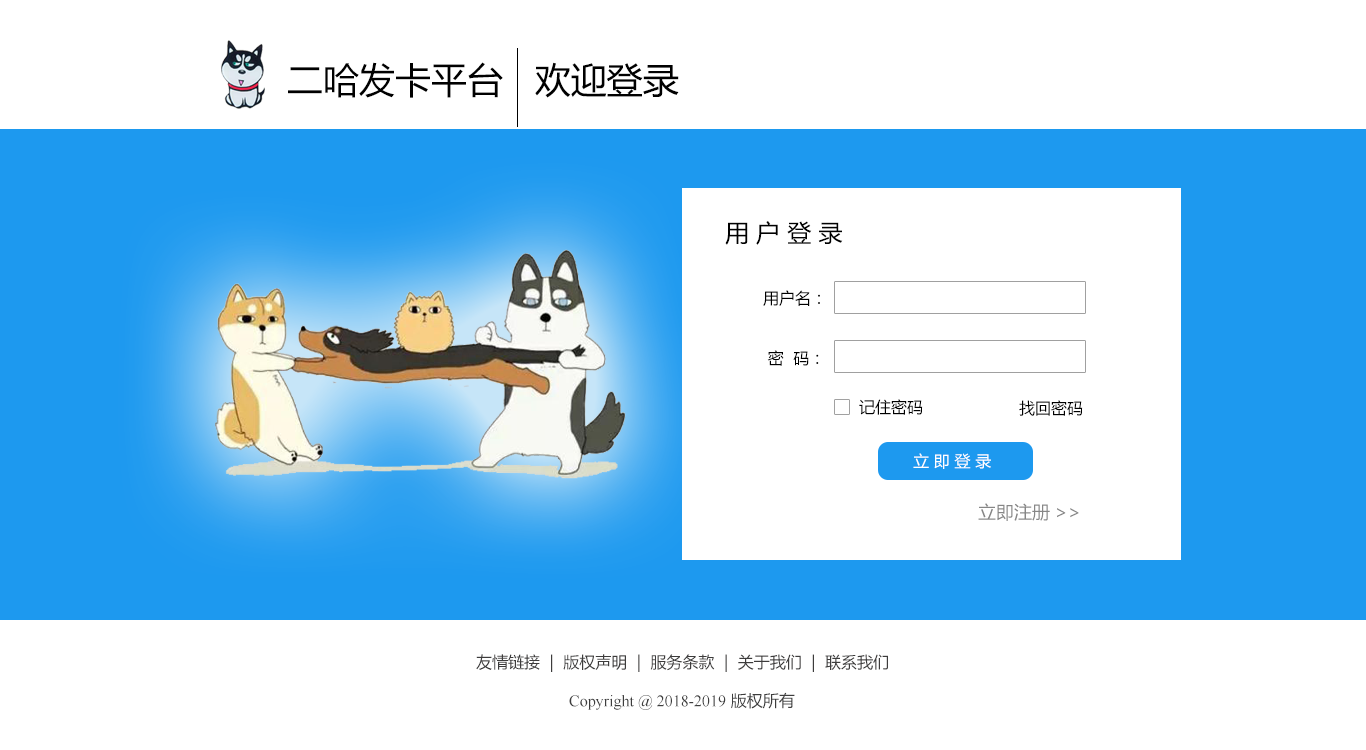
<style>
.page{position:relative;width:1366px;height:750px;background:#ffffff}
.page>*{position:absolute;margin:0}
.t1{font:36px "MicrosoftYaHei";color:#000000}
.t2{font:24px "MicrosoftYaHei";color:#000000}
.t3{font:16px/60px "MicrosoftYaHei";color:#000000}
.t4{font:16px "MicrosoftYaHei";color:#000000}
.t5{font:16px "MicrosoftYaHei";color:#ffffff}
.t6{font:18px "MicrosoftYaHei";color:#868686}
.t7{font:16px "MicrosoftYaHei";color:#3d3c3c}
.t8{font:16px "TimesNewRomanPSMT";color:#3d3d3d}
.t9{font:16px "MicrosoftYaHei";color:#3d3d3d}
</style>
<div class="page">
<p class="t1" style="left:288px;top:62px;width:391px;height:36px">二哈发卡平台   欢迎登录</p>
<p class="t2" style="left:725px;top:221px;width:118px;height:24px">用 户 登 录</p>
<p class="t3" style="left:763px;top:290px;width:57px;height:76px">用户名：<br> 密  码：</p>
<p class="t4" style="left:859px;top:399px;width:64px;height:16px">记住密码</p>
<p class="t4" style="left:1019px;top:400px;width:64px;height:16px">找回密码</p>
<p class="t5" style="left:913px;top:453px;width:78px;height:16px">立 即 登 录</p>
<p class="t6" style="left:978px;top:503px;width:101px;height:18px">立即注册&gt;&gt;</p>
<p class="t7" style="left:476px;top:654px;width:412px;height:18px">友情链接  |  版权声明  |  服务条款  |  关于我们  |  联系我们</p>
<p class="t8" style="left:569px;top:692px;width:226px;height:18px">Copyright @ 2018-2019<span class="t9"> 版权所有</span></p>
</div>
